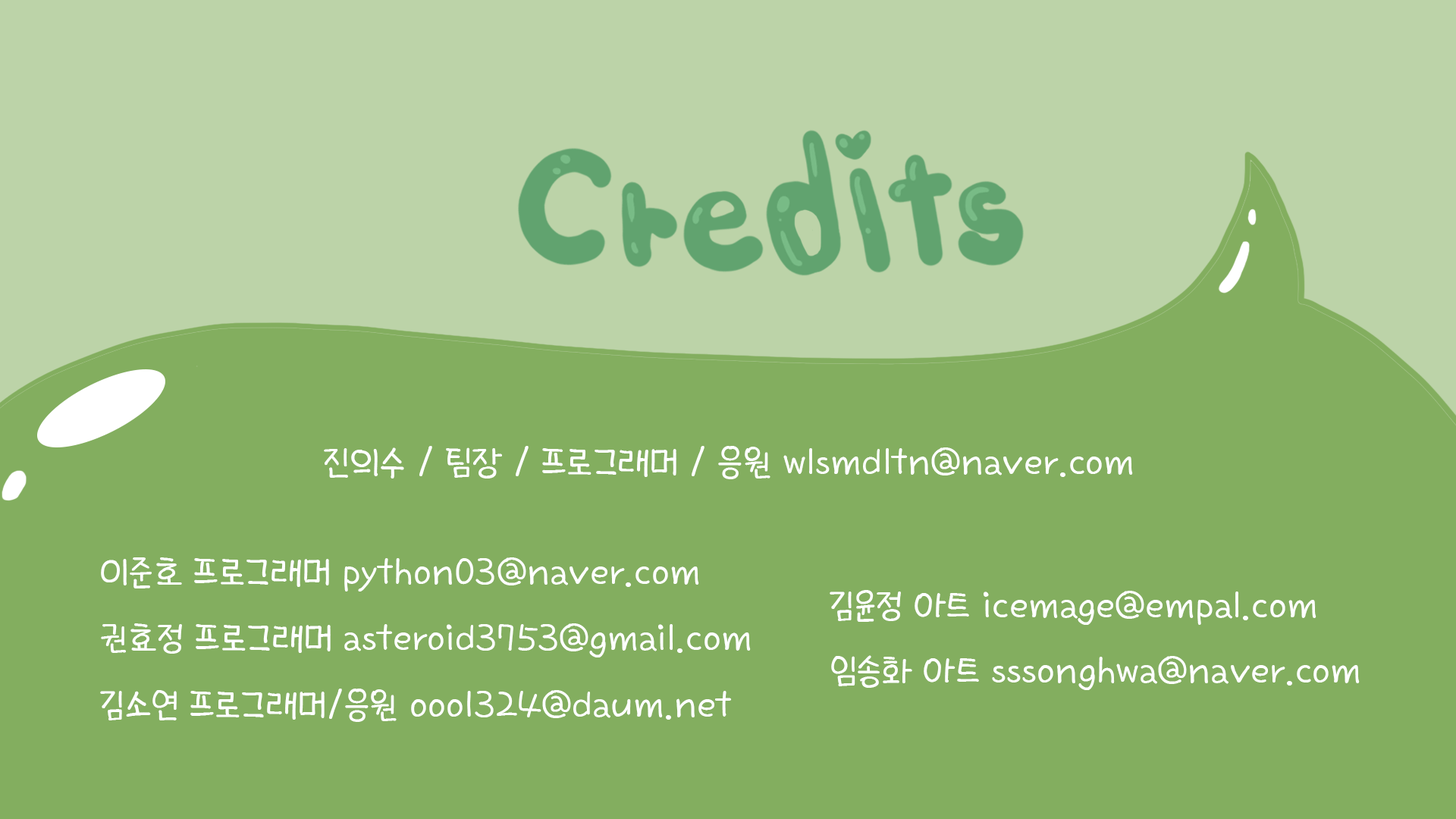
<style>
.page{position:relative;width:1456px;height:819px;background:#83ae5f}
.page>*{position:absolute;margin:0}
.t1{font:9.1px "KyoboHandwriting2019";color:#ffffff}
.t2{font:37.9px "KyoboHandwriting2019";color:#ffffff}
</style>
<div class="page">
<p class="t1" style="left:324px;top:446px;width:809px;height:33px">진의수 / 팀장 / 프로그래머 / 응원 wlsmdltn@naver.com</p>
<p class="t2" style="left:101px;top:557px;width:598px;height:34px">이준호 프로그래머 python03@naver.com</p>
<p class="t1" style="left:830px;top:590px;width:486px;height:35px">김윤정 아트 icemage@empal.com</p>
<p class="t1" style="left:101px;top:623px;width:650px;height:34px">권효정 프로그래머 asteroid3753@gmail.com</p>
<p class="t1" style="left:831px;top:655px;width:529px;height:35px">임송화 아트 sssonghwa@naver.com</p>
<p class="t1" style="left:100px;top:689px;width:632px;height:33px">김소연 프로그래머/응원 ooo1324@daum.net</p>
</div>
